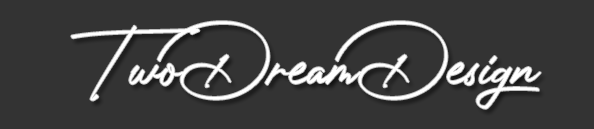
<style>
.page{position:relative;width:594px;height:129px;background:#333333}
.page>*{position:absolute;margin:0}
.t1{font:80px "PhotographSignature";color:#ffffff}
</style>
<div class="page">
<p class="t1" style="left:71px;top:21px;width:470px;height:88px">TwoDreamDesign</p>
</div>
